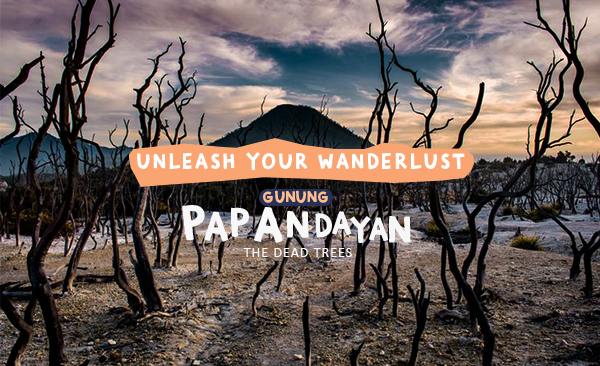
<style>
.page{position:relative;width:600px;height:366px}
.page>*{position:absolute;margin:0}
.t1{font:22.1px "ExplorerFree-Regular";letter-spacing:0.08em;color:#ffffff}
.t2{font:17.3px "ExplorerFree-Regular";color:#fdbb8c}
.t3{font:49.8px "ExplorerFree-Regular";color:#fcfcfc}
.t4{font:41.5px "ExplorerFree-Regular";color:#fcfcfc}
.t5{font:33.2px "ExplorerFree-Regular";color:#fcfcfc}
.t6{font:13.8px "Calibri";letter-spacing:0.08em;color:#fcfbfb}
</style>
<div class="page">
<p class="t1" style="left:137px;top:152px;width:328px;height:18px">UNLEASH YOUR WANDERLUST</p>
<p class="t2" style="left:263px;top:190px;width:65px;height:13px">GUNUNG</p>
<p class="t3" style="left:182px;top:205px;width:23px;height:36px;rotate:-6deg">P</p>
<p class="t4" style="left:231px;top:207px;width:18px;height:30px">P</p>
<p class="t3" style="left:254px;top:207px;width:29px;height:36px">A</p>
<p class="t4" style="left:204px;top:211px;width:24px;height:31px">A</p>
<p class="t4" style="left:286px;top:211px;width:23px;height:27px">N</p>
<p class="t5" style="left:315px;top:213px;width:17px;height:25px">D</p>
<p class="t5" style="left:332px;top:211px;width:19px;height:24px">A</p>
<p class="t5" style="left:350px;top:216px;width:21px;height:27px">Y</p>
<p class="t5" style="left:369px;top:217px;width:19px;height:24px">A</p>
<p class="t4" style="left:388px;top:216px;width:23px;height:27px">N</p>
<p class="t6" style="left:243px;top:248px;width:109px;height:9px">THE DEAD TREES</p>
</div>
